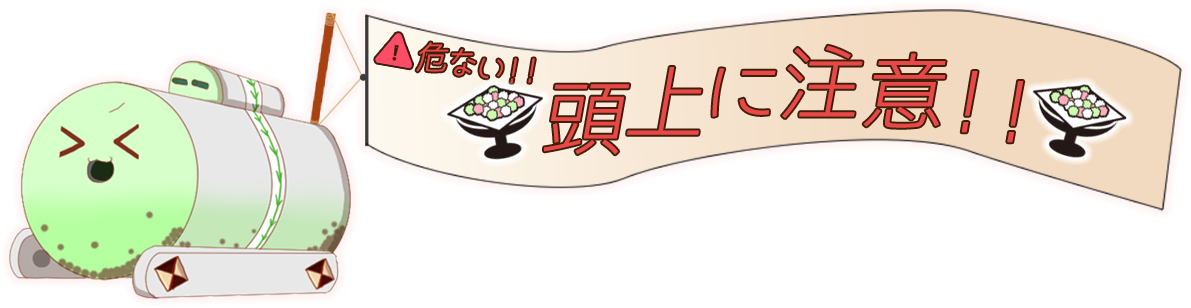
<style>
.page{position:relative;width:1191px;height:308px;background:#ffffff}
.page>*{position:absolute;margin:0}
.t1{font:32.5px "JK-Gothic-L";color:#e94848;font-weight:bold;font-style:italic}
.t2{font:83.2px "JK-Gothic-L";color:#e94848;font-weight:bold;font-style:italic}
</style>
<div class="page">
<p class="t1" style="left:416px;top:42px;width:119px;height:41px">危ない！！</p>
<p class="t2" style="left:544px;top:45px;width:480px;height:110px">頭上に注意！！</p>
</div>
